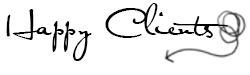
<style>
.page{position:relative;width:250px;height:75px;background:#ffffff}
.page>*{position:absolute;margin:0}
.t1{font:30px "Satisfaction";color:#000000}
</style>
<div class="page">
<p class="t1" style="left:6px;top:3px;width:222px;height:58px">Happy Clients</p>
</div>
